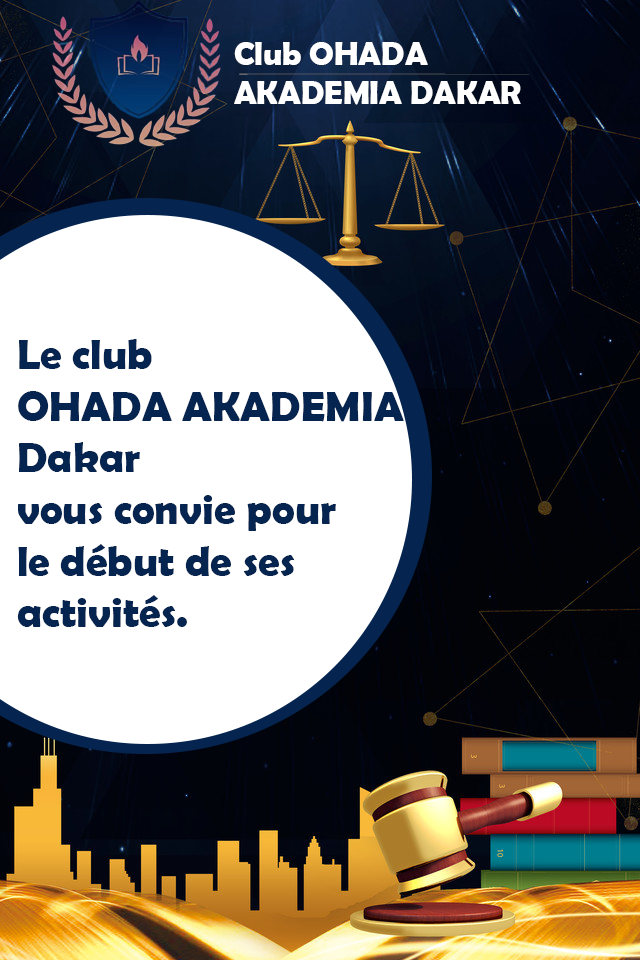
<style>
.page{position:relative;width:640px;height:960px;background:#ffffff}
.page>*{position:absolute;margin:0}
.t1{font:32.8px "BerlinSansFBDemi-Bold";color:#ffffff}
.t2{font:0.2px "BerlinSansFBDemi-Bold"}
.t3{font:43.1px "BerlinSansFBDemi-Bold";color:#05244f}
</style>
<div class="page">
<p class="t1" style="left:234px;top:42px;width:287px;height:63px">Club OHADA <br>AKADEMIA DAKAR</p>
<p class="t2" style="left:239px;top:73px;width:291px;height:2px">Club OHADA <br><br><br><br><br>AKADEMIA DAKAR</p>
<p class="t3" style="left:17px;top:339px;width:387px;height:288px">Le club <br>OHADA AKADEMIA <br>Dakar <br>vous convie pour <br>le début de ses <br>activités.</p>
</div>
